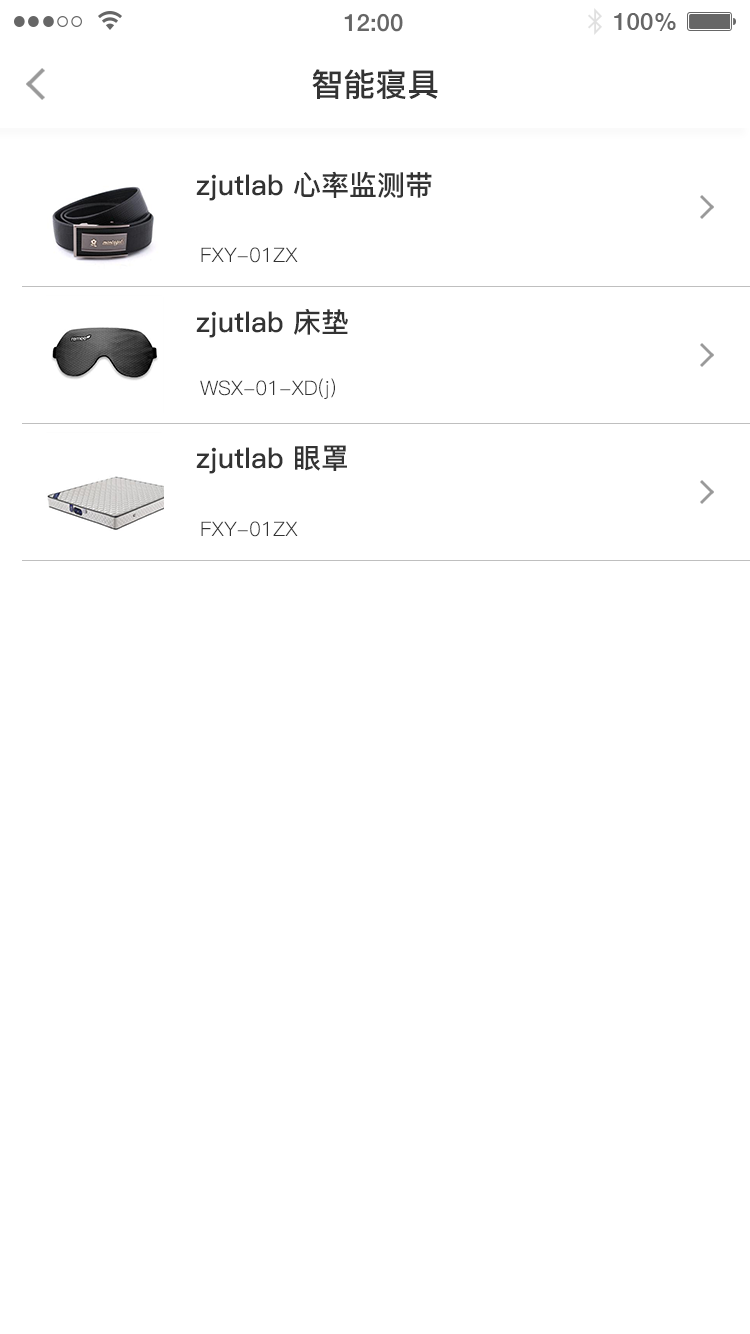
<style>
.page{position:relative;width:750px;height:1334px;background:#ffffff}
.page>*{position:absolute;margin:0}
.t1{font:32px "PingFang-SC-Bold";color:#333333}
.t2{font:28px "PingFang-SC-Bold";color:#333333}
.t3{font:20px "PingFang-SC-Regular";color:#333333}
</style>
<div class="page">
<p class="t1" style="left:312px;top:69px;width:126px;height:30px">智能寝具</p>
<p class="t2" style="left:196px;top:171px;width:236px;height:30px">zjutlab 心率监测带</p>
<p class="t3" style="left:201px;top:247px;width:97px;height:16px">FXY-01ZX</p>
<p class="t2" style="left:196px;top:309px;width:152px;height:29px">zjutlab 床垫</p>
<p class="t3" style="left:200px;top:378px;width:135px;height:21px">WSX-01-XD(j)</p>
<p class="t2" style="left:196px;top:445px;width:151px;height:29px">zjutlab 眼罩</p>
<p class="t3" style="left:201px;top:521px;width:97px;height:16px">FXY-01ZX</p>
</div>
